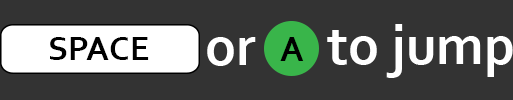
<style>
.page{position:relative;width:513px;height:100px;background:#333333}
.page>*{position:absolute;margin:0}
.t1{font:56px "Corbel-Bold";color:#ffffff}
.t2{font:35px "Corbel-Bold";color:#000000}
.t3{font:36px "Corbel-Bold";color:#000000}
</style>
<div class="page">
<p class="t1" style="left:327px;top:24px;width:186px;height:54px">to jump</p>
<p class="t2" style="left:50px;top:37px;width:99px;height:23px">SPACE</p>
<p class="t1" style="left:207px;top:37px;width:49px;height:29px">or</p>
<p class="t3" style="left:280px;top:37px;width:24px;height:24px">A</p>
</div>
